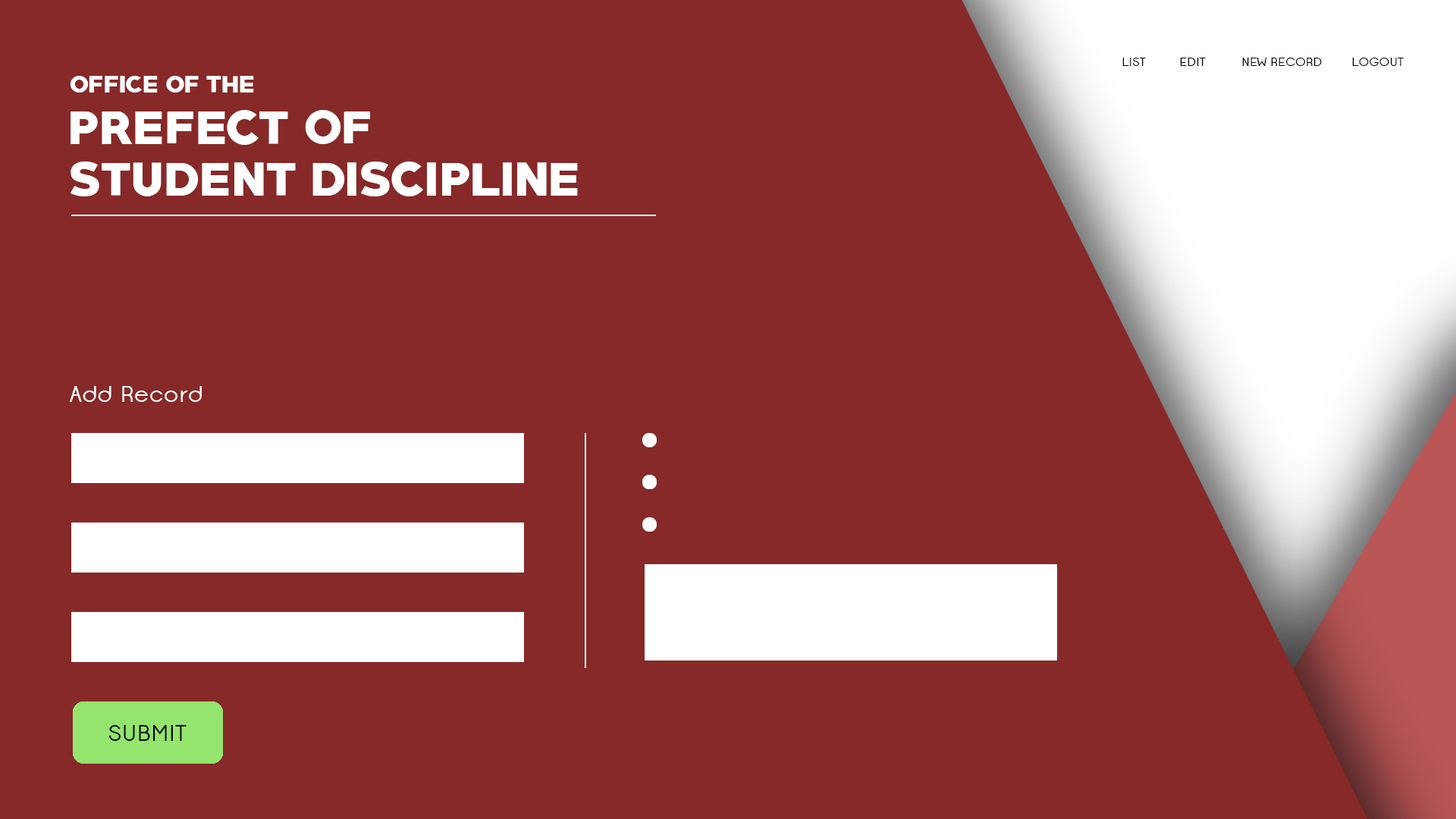
<style>
.page{position:relative;width:1456px;height:819px;background:#872929}
.page>*{position:absolute;margin:0}
.t1{font:12.1px "Opificio-Regular";color:#000000}
.t2{font:42.8px "PRIMETIME-Regular";color:#ffffff}
.t3{font:21.4px "PRIMETIME-Regular";color:#ffffff}
.t4{font:22.7px "Opificio-Regular";color:#ffffff}
.t5{font:22.7px "Opificio-Regular";color:#000000}
</style>
<div class="page">
<p class="t1" style="left:1122px;top:58px;width:24px;height:8px">LIST</p>
<p class="t1" style="left:1180px;top:58px;width:26px;height:8px">EDIT</p>
<p class="t1" style="left:1242px;top:58px;width:80px;height:8px">NEW RECORD</p>
<p class="t1" style="left:1352px;top:58px;width:52px;height:8px">LOGOUT</p>
<p class="t2" style="left:70px;top:76px;width:508px;height:120px"><span class="t3">OFFICE OF THE</span> <br>PREFECT OF <br>STUDENT DISCIPLINE</p>
<p class="t4" style="left:70px;top:386px;width:132px;height:16px">Add Record</p>
<p class="t5" style="left:108px;top:725px;width:79px;height:16px">SUBMIT</p>
</div>
